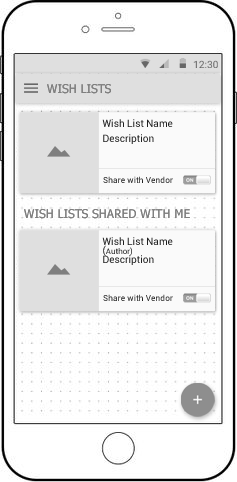
<style>
.page{position:relative;width:237px;height:482px;background:#ffffff}
.page>*{position:absolute;margin:0}
.t1{font:12px "Tahoma";color:#7f7f7f}
.t2{font:9.9px/14.3px "Roboto-Regular";letter-spacing:0.005em;color:#202020}
.t3{font:8.3px "Roboto-Regular";letter-spacing:0.01em;color:#202020}
.t4{font:9.9px/9px "Roboto-Regular";letter-spacing:0.005em;color:#202020}
.t5{font:7.9px/9px "Roboto-Regular";letter-spacing:0.005em;color:#202020}
</style>
<div class="page">
<p class="t1" style="left:47px;top:84px;width:64px;height:10px">WISH LISTS</p>
<p class="t2" style="left:102px;top:119px;width:71px;height:25px">Wish List Name<br>Description</p>
<p class="t3" style="left:103px;top:176px;width:70px;height:7px">Share with Vendor</p>
<p class="t1" style="left:24px;top:209px;width:166px;height:10px">WISH LISTS SHARED WITH ME</p>
<p class="t4" style="left:102px;top:237px;width:71px;height:28px">Wish List Name<br>(<span class="t5">Author)<br></span>Description</p>
<p class="t3" style="left:103px;top:294px;width:70px;height:7px">Share with Vendor</p>
</div>
